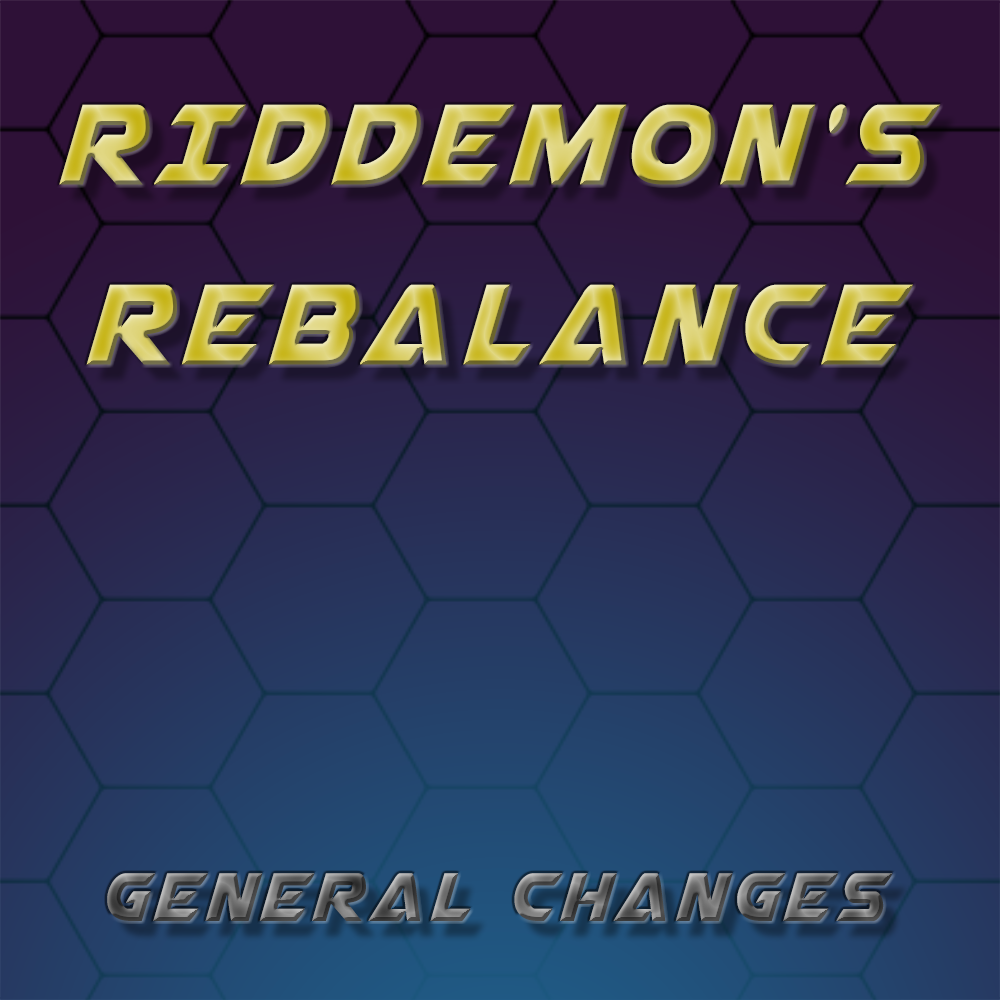
<style>
.page{position:relative;width:1000px;height:1000px}
.page>*{position:absolute;margin:0}
.t1{font:150px "AirstrikeCondensed";letter-spacing:0.08em;text-transform:uppercase}
.t2{font:90px "AirstrikeCondensed";letter-spacing:0.08em;text-transform:uppercase}
</style>
<div class="page">
<p class="t1" style="left:59px;top:104px;width:882px;height:261px;text-align:center">Riddemon's<br>Rebalance</p>
<p class="t2" style="left:107px;top:873px;width:786px;height:48px">general changes</p>
</div>
